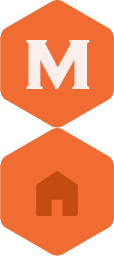
<style>
.page{position:relative;width:114px;height:256px;background:#f16c32}
.page>*{position:absolute;margin:0}
.t1{font:72px "CopperplateGothic-Bold";letter-spacing:0.005em;color:#faefea;font-weight:bold}
</style>
<div class="page">
<p class="t1" style="left:26px;top:40px;width:64px;height:49px">M</p>
</div>
